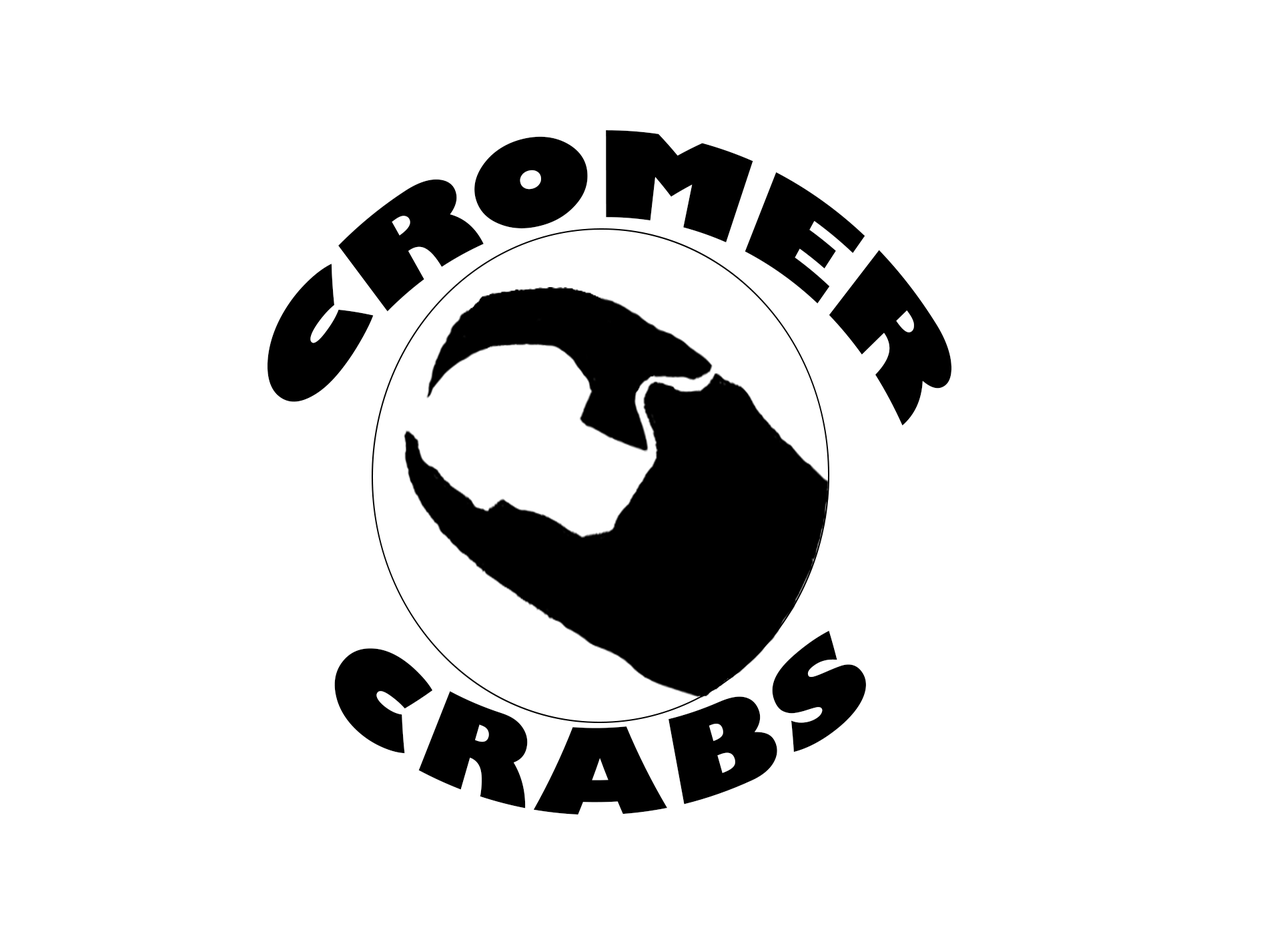
<style>
.page{position:relative;width:1261px;height:946px;background:#ffffff}
.page>*{position:absolute;margin:0}
.t1{font:115.8px "GillSans-UltraBold";letter-spacing:0.01em;color:#000000;scale:0.86 1}
.t2{font:115.8px "GillSans-UltraBold";letter-spacing:0.06em;color:#000000;scale:0.86 1}
</style>
<div class="page">
<p class="t1" style="left:267px;top:130px;width:685px;height:296px">CROMER</p>
<p class="t2" style="left:334px;top:630px;width:532px;height:184px">CRABS</p>
</div>
